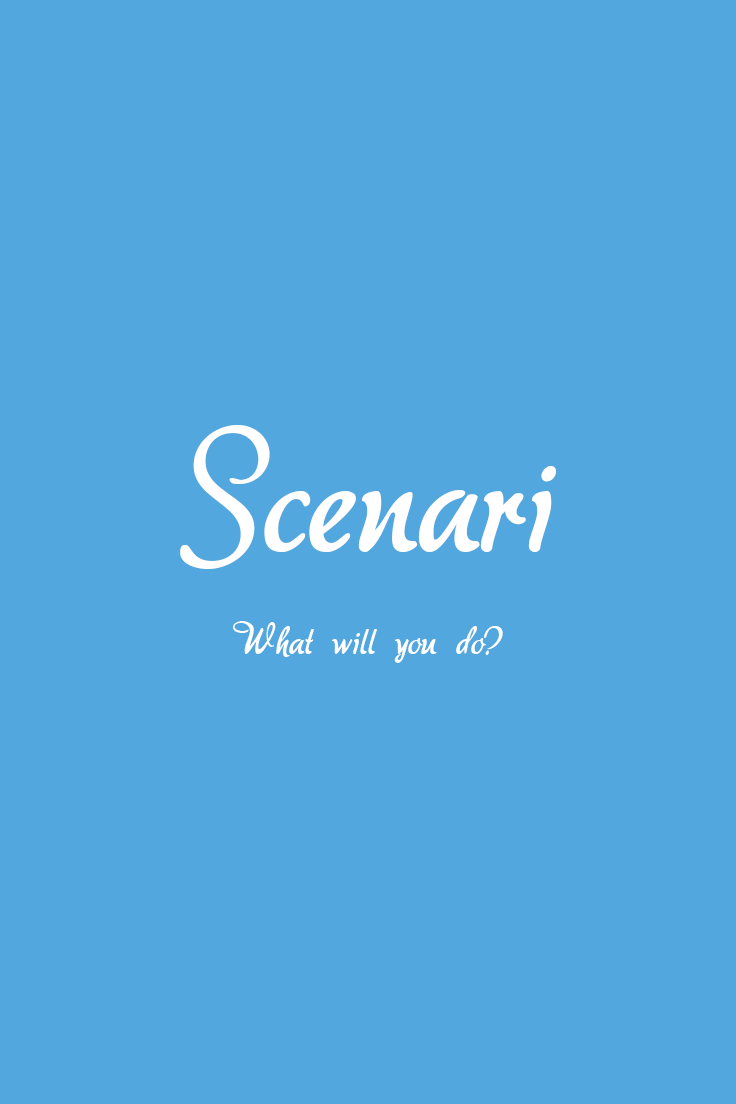
<style>
.page{position:relative;width:736px;height:1104px;background:#52a7df}
.page>*{position:absolute;margin:0}
.t1{font:153.3px "akaDora";color:#ffffff}
.t2{font:38.3px "akaDora";color:#ffffff}
</style>
<div class="page">
<p class="t1" style="left:180px;top:425px;width:377px;height:144px">Scenari</p>
<p class="t2" style="left:233px;top:621px;width:270px;height:42px">What will you do?</p>
</div>
